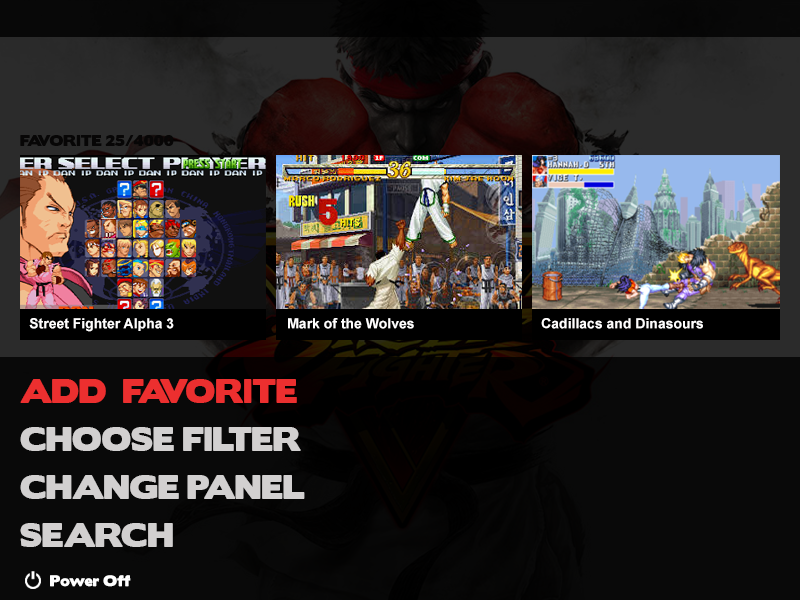
<style>
.page{position:relative;width:800px;height:600px;background:#090909}
.page>*{position:absolute;margin:0}
.t1{font:14px "BorisBlackBloxx";color:#0f0c0c}
.t2{font:14px "Arial-BoldMT";color:#fffefe}
.t3{font:30px/48px "BorisBlackBloxx";color:#d2d0d0}
.t4{font:30px/48px "BorisBlackBloxx";color:#ec2f2f}
.t5{font:14px "BorisBlackBloxx";color:#ffffff}
</style>
<div class="page">
<p class="t1" style="left:20px;top:135px;width:154px;height:11px">FAVORITE 25/4000</p>
<p class="t2" style="left:29px;top:318px;width:145px;height:14px">Street Fighter Alpha 3</p>
<p class="t2" style="left:288px;top:318px;width:126px;height:11px">Mark of the Wolves</p>
<p class="t2" style="left:541px;top:318px;width:162px;height:11px">Cadillacs and Dinasours</p>
<p class="t3" style="left:20px;top:379px;width:285px;height:168px"><span class="t4">ADD  FAVORITE<br></span>CHOOSE FILTER<br>CHANGE PANEL<br>SEARCH</p>
<p class="t5" style="left:50px;top:575px;width:81px;height:12px">Power Off</p>
</div>
